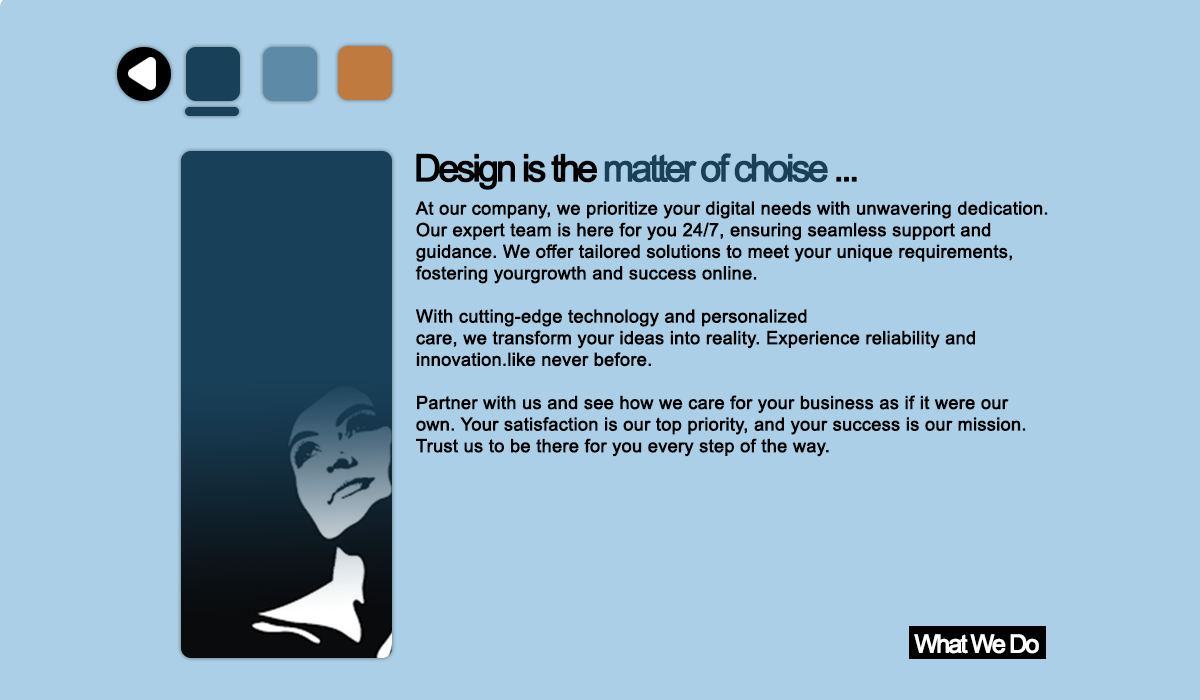
<style>
.page{position:relative;width:1200px;height:700px;background:#abcfe6}
.page>*{position:absolute;margin:0}
.t1{font:18px "ArialMT";letter-spacing:-0.005em;color:#000000;font-weight:bold}
</style>
<div class="page">
<p class="t1" style="left:415px;top:201px;width:633px;height:256px;text-align:justify">At our company, we prioritize your digital needs with unwavering dedication. <br>Our expert team is here for you 24/7, ensuring seamless support and <br>guidance. We offer tailored solutions to meet your unique requirements,<br>fostering yourgrowth and success online.<br><br>With cutting-edge technology and personalized<br>care, we transform your ideas into reality. Experience reliability and<br>innovation.like never before. <br><br>Partner with us and see how we care for your business as if it were our<br>own. Your satisfaction is our top priority, and your success is our mission.<br>Trust us to be there for you every step of the way.</p>
</div>
